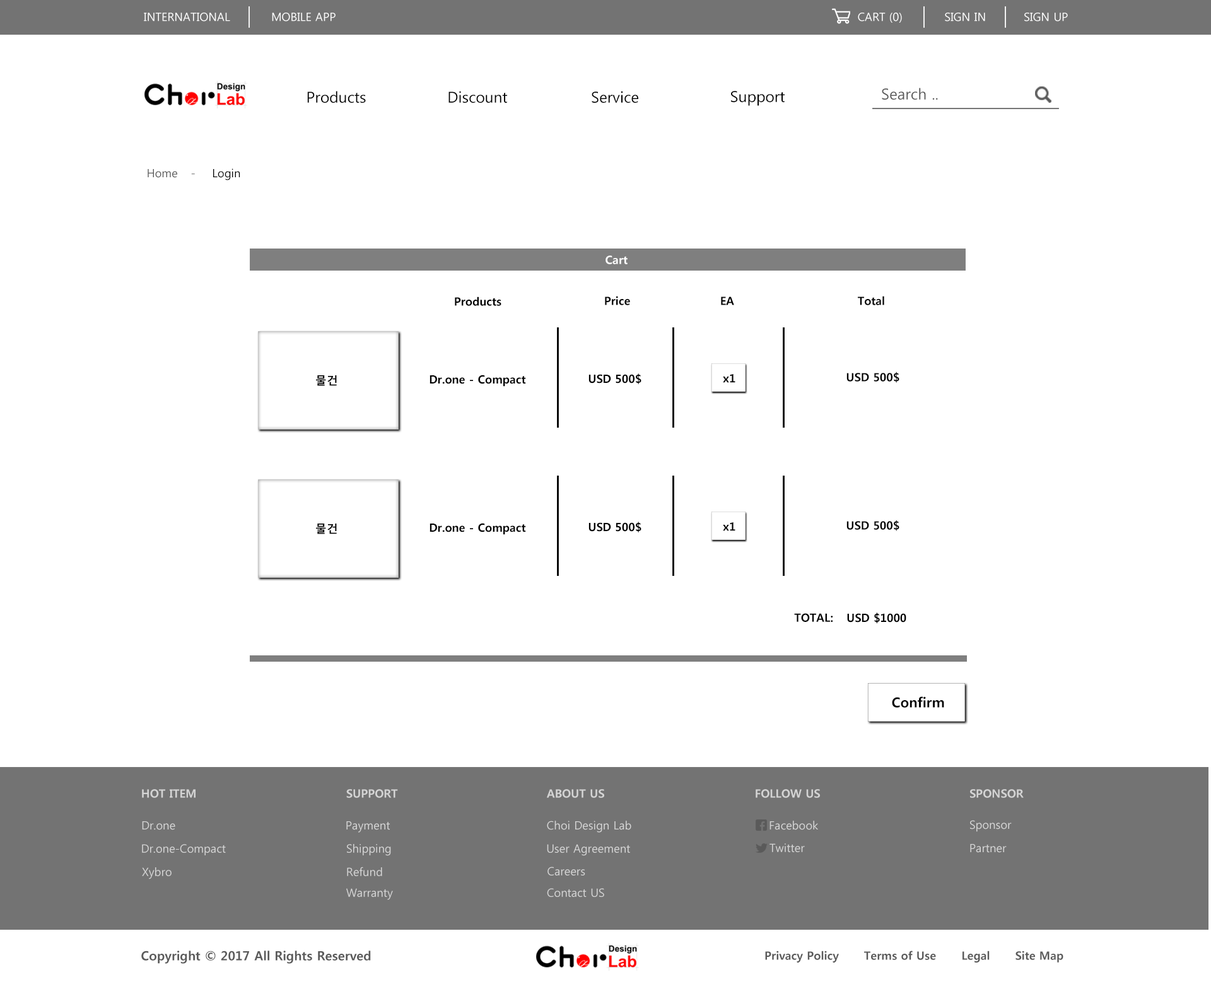
<style>
.page{position:relative;width:1211px;height:984px;background:#ffffff}
.page>*{position:absolute;margin:0}
.t1{font:11.4px "MalgunGothicRegular";color:#ffffff}
.t2{font:15.1px "MalgunGothicRegular";color:#5a5a5a}
.t3{font:15.1px "MalgunGothicRegular";color:#000000}
.t4{font:11.4px "MalgunGothicRegular";color:#5a5a5a}
.t5{font:11.4px "MalgunGothicRegular"}
.t6{font:11.4px "MalgunGothicRegular";color:#040404}
.t7{font:11.4px "MalgunGothicBold";color:#ffffff}
.t8{font:11.4px "MalgunGothicBold";color:#000000}
.t9{font:13.9px "MalgunGothicBold";color:#000000}
.t10{font:11.4px "MalgunGothicBold";color:#d4d4d4}
.t11{font:11.4px "MalgunGothicRegular";color:#d4d4d4}
.t12{font:12.6px "MalgunGothicBold";color:#5a5a5a}
.t13{font:11.4px "MalgunGothicBold";color:#5a5a5a}
</style>
<div class="page">
<p class="t1" style="left:144px;top:13px;width:86px;height:8px">INTERNATIONAL</p>
<p class="t1" style="left:272px;top:13px;width:64px;height:8px">MOBILE APP</p>
<p class="t1" style="left:858px;top:13px;width:44px;height:10px">CART (0)</p>
<p class="t1" style="left:945px;top:13px;width:41px;height:8px">SIGN IN</p>
<p class="t1" style="left:1025px;top:13px;width:43px;height:8px">SIGN UP</p>
<p class="t2" style="left:882px;top:88px;width:56px;height:12px">Search ..</p>
<p class="t3" style="left:307px;top:91px;width:59px;height:12px">Products</p>
<p class="t3" style="left:449px;top:91px;width:58px;height:12px">Discount</p>
<p class="t3" style="left:592px;top:91px;width:47px;height:12px">Service</p>
<p class="t3" style="left:731px;top:91px;width:54px;height:15px">Support</p>
<p class="t4" style="left:148px;top:169px;width:29px;height:9px">Home</p>
<p class="t5" style="left:191px;top:174px;width:4px;height:1px">-</p>
<p class="t6" style="left:213px;top:168px;width:27px;height:12px">Login</p>
<p class="t7" style="left:606px;top:256px;width:22px;height:8px">Cart</p>
<p class="t8" style="left:455px;top:297px;width:47px;height:9px">Products</p>
<p class="t8" style="left:605px;top:296px;width:25px;height:9px">Price</p>
<p class="t8" style="left:721px;top:297px;width:13px;height:8px">EA</p>
<p class="t8" style="left:858px;top:296px;width:27px;height:9px">Total</p>
<p class="t8" style="left:316px;top:375px;width:21px;height:11px">물건</p>
<p class="t8" style="left:430px;top:375px;width:96px;height:12px">Dr.one - Compact</p>
<p class="t8" style="left:589px;top:374px;width:53px;height:10px">USD 500$</p>
<p class="t8" style="left:723px;top:374px;width:13px;height:9px">x1</p>
<p class="t8" style="left:847px;top:372px;width:53px;height:11px">USD 500$</p>
<p class="t8" style="left:589px;top:522px;width:53px;height:11px">USD 500$</p>
<p class="t8" style="left:847px;top:520px;width:53px;height:11px">USD 500$</p>
<p class="t8" style="left:316px;top:524px;width:21px;height:10px">물건</p>
<p class="t8" style="left:430px;top:523px;width:96px;height:12px">Dr.one - Compact</p>
<p class="t8" style="left:723px;top:522px;width:13px;height:9px">x1</p>
<p class="t8" style="left:794px;top:613px;width:40px;height:9px">TOTAL:</p>
<p class="t8" style="left:847px;top:613px;width:60px;height:10px">USD $1000</p>
<p class="t9" style="left:892px;top:697px;width:53px;height:11px">Confirm</p>
<p class="t10" style="left:142px;top:789px;width:54px;height:9px">HOT ITEM</p>
<p class="t10" style="left:346px;top:789px;width:52px;height:9px">SUPPORT</p>
<p class="t10" style="left:547px;top:789px;width:57px;height:9px">ABOUT US</p>
<p class="t10" style="left:756px;top:789px;width:64px;height:9px">FOLLOW US</p>
<p class="t10" style="left:970px;top:789px;width:54px;height:9px">SPONSOR</p>
<p class="t11" style="left:142px;top:822px;width:33px;height:8px">Dr.one</p>
<p class="t11" style="left:346px;top:822px;width:44px;height:11px">Payment</p>
<p class="t11" style="left:547px;top:821px;width:85px;height:12px">Choi Design Lab</p>
<p class="t11" style="left:770px;top:821px;width:48px;height:9px">Facebook</p>
<p class="t11" style="left:970px;top:820px;width:42px;height:12px">Sponsor</p>
<p class="t11" style="left:142px;top:844px;width:84px;height:12px">Dr.one-Compact</p>
<p class="t11" style="left:347px;top:844px;width:44px;height:12px">Shipping</p>
<p class="t11" style="left:547px;top:844px;width:83px;height:12px">User Agreement</p>
<p class="t11" style="left:770px;top:844px;width:35px;height:8px">Twitter</p>
<p class="t11" style="left:970px;top:844px;width:37px;height:9px">Partner</p>
<p class="t11" style="left:142px;top:868px;width:30px;height:12px">Xybro</p>
<p class="t11" style="left:347px;top:867px;width:35px;height:9px">Refund</p>
<p class="t11" style="left:548px;top:867px;width:38px;height:9px">Careers</p>
<p class="t11" style="left:346px;top:888px;width:47px;height:12px">Warranty</p>
<p class="t11" style="left:547px;top:888px;width:57px;height:9px">Contact US</p>
<p class="t12" style="left:141px;top:951px;width:230px;height:13px">Copyright © 2017 All Rights Reserved</p>
<p class="t13" style="left:765px;top:951px;width:74px;height:12px">Privacy Policy</p>
<p class="t13" style="left:864px;top:951px;width:72px;height:9px">Terms of Use</p>
<p class="t13" style="left:963px;top:951px;width:27px;height:12px">Legal</p>
<p class="t13" style="left:1016px;top:951px;width:48px;height:12px">Site Map</p>
</div>
